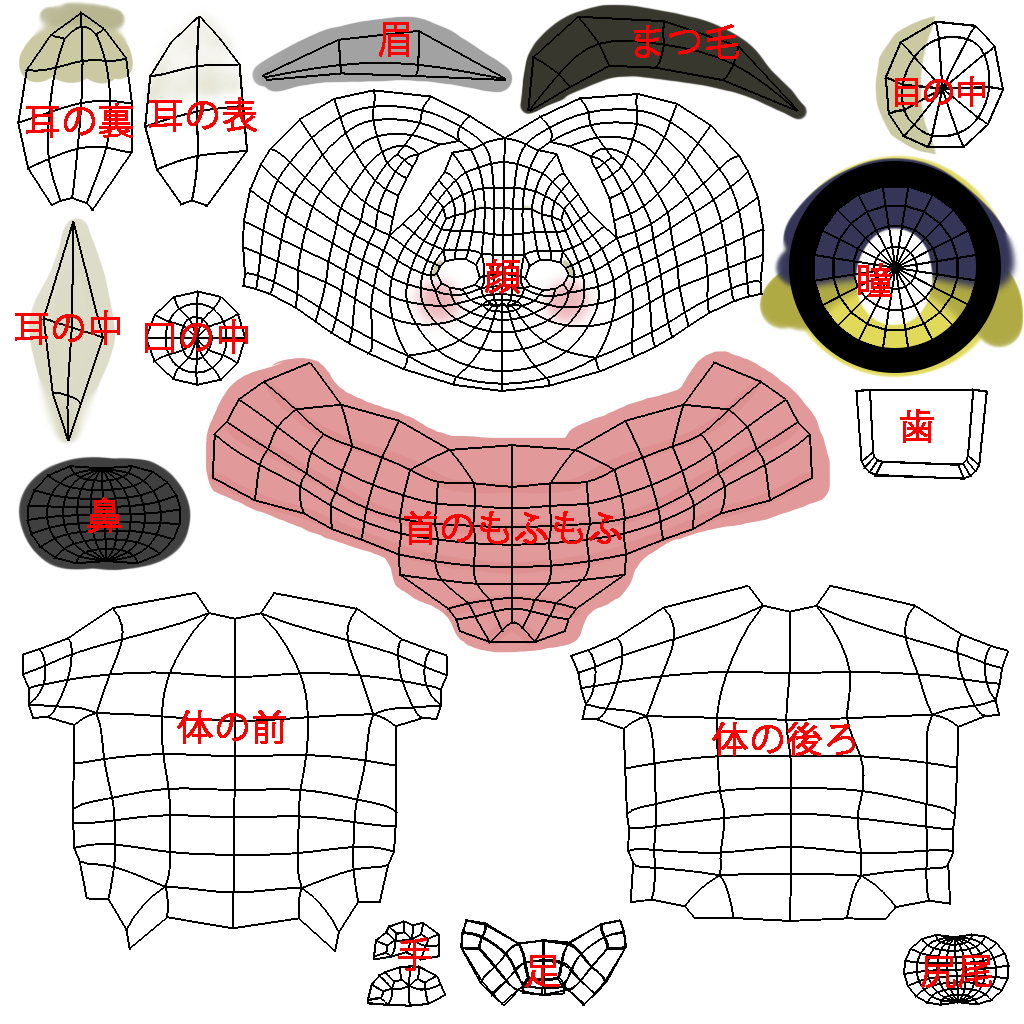
<style>
.page{position:relative;width:1024px;height:1024px;background:#ffffff}
.page>*{position:absolute;margin:0}
.t1{font:36px "KozGoPr6N-Regular";color:#ff0000;font-weight:bold}
.t2{font:31.9px "KozGoPr6N-Regular";color:#ff0000;font-weight:bold}
</style>
<div class="page">
<p class="t1" style="left:379px;top:22px;width:30px;height:35px">眉</p>
<p class="t1" style="left:634px;top:24px;width:105px;height:35px">まつ毛</p>
<p class="t2" style="left:895px;top:76px;width:90px;height:31px">目の中</p>
<p class="t1" style="left:149px;top:97px;width:108px;height:35px">耳の表</p>
<p class="t1" style="left:26px;top:103px;width:107px;height:35px">耳の裏</p>
<p class="t1" style="left:485px;top:259px;width:35px;height:35px">顔</p>
<p class="t1" style="left:858px;top:263px;width:34px;height:34px">瞳</p>
<p class="t1" style="left:15px;top:310px;width:105px;height:35px">耳の中</p>
<p class="t1" style="left:145px;top:319px;width:103px;height:35px">口の中</p>
<p class="t1" style="left:900px;top:409px;width:34px;height:34px">歯</p>
<p class="t1" style="left:87px;top:497px;width:35px;height:36px">鼻</p>
<p class="t1" style="left:404px;top:511px;width:218px;height:34px">首のもふもふ</p>
<p class="t1" style="left:177px;top:710px;width:109px;height:34px">体の前</p>
<p class="t1" style="left:712px;top:722px;width:143px;height:34px">体の後ろ</p>
<p class="t1" style="left:398px;top:937px;width:33px;height:34px">手</p>
<p class="t1" style="left:525px;top:955px;width:35px;height:33px">足</p>
<p class="t1" style="left:921px;top:955px;width:71px;height:33px">尻尾</p>
</div>
